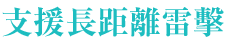
<style>
.page{position:relative;width:226px;height:43px;background:#ffffff}
.page>*{position:absolute;margin:0}
.t1{font:32px "RyuminPro-ExBold";color:#1dbdc0}
</style>
<div class="page">
<p class="t1" style="left:2px;top:6px;width:222px;height:31px">支援長距離雷擊</p>
</div>
